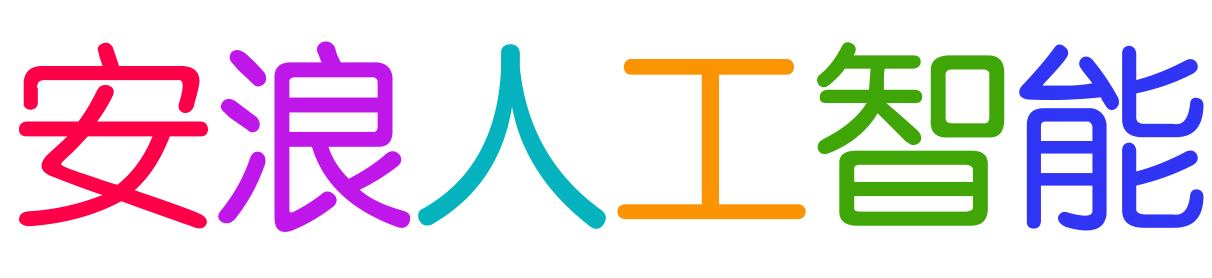
<style>
.page{position:relative;width:1212px;height:278px;background:#ffffff}
.page>*{position:absolute;margin:0}
.t1{font:200px "FZY3JW--GB1-0";color:#ff0048}
.t2{font:200px "FZY3JW--GB1-0";color:#bf17e9}
.t3{font:200px "FZY3JW--GB1-0";color:#04b3be}
.t4{font:200px "FZY3JW--GB1-0";color:#fb9402}
.t5{font:200px "FZY3JW--GB1-0";color:#40a608}
.t6{font:200px "FZY3JW--GB1-0";color:#3034f4}
</style>
<div class="page">
<p class="t1" style="left:19px;top:41px;width:1185px;height:191px">安<span class="t2">浪</span><span class="t3">人</span><span class="t4">工</span><span class="t5">智</span><span class="t6">能</span></p>
</div>
